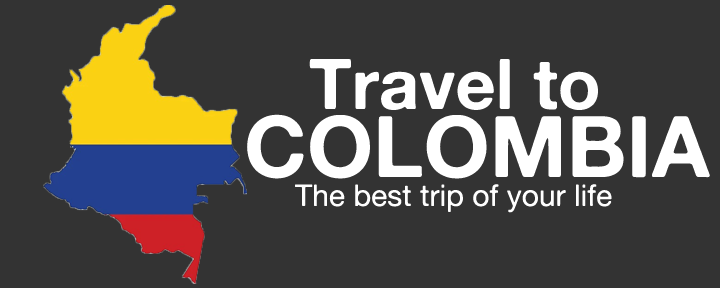
<style>
.page{position:relative;width:720px;height:288px;background:#333333}
.page>*{position:absolute;margin:0}
.t1{font:70px "AlteHaasGrotesk_Bold";color:#ffffff}
.t2{font:85px "AlteHaasGrotesk_Bold";color:#ffffff}
.t3{font:30px "AlteHaasGrotesk";color:#ffffff}
</style>
<div class="page">
<p class="t1" style="left:309px;top:59px;width:289px;height:51px">Travel to</p>
<p class="t2" style="left:247px;top:114px;width:463px;height:65px">COLOMBIA</p>
<p class="t3" style="left:295px;top:184px;width:317px;height:29px">The best trip of your life</p>
</div>
